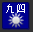
<style>
.page{position:relative;width:33px;height:32px;background:#000090}
.page>*{position:absolute;margin:0}
.t1{font:10.4px "SimSun";color:#ffffff}
</style>
<div class="page">
<p class="t1" style="left:6px;top:4px;width:19px;height:9px">九四</p>
</div>
